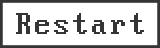
<style>
.page{position:relative;width:160px;height:48px;background:#ffffff}
.page>*{position:absolute;margin:0}
.t1{font:33.3px "PerfectDOSVGA437Win";color:#353535}
</style>
<div class="page">
<p class="t1" style="left:16px;top:13px;width:128px;height:21px">Restart</p>
</div>
